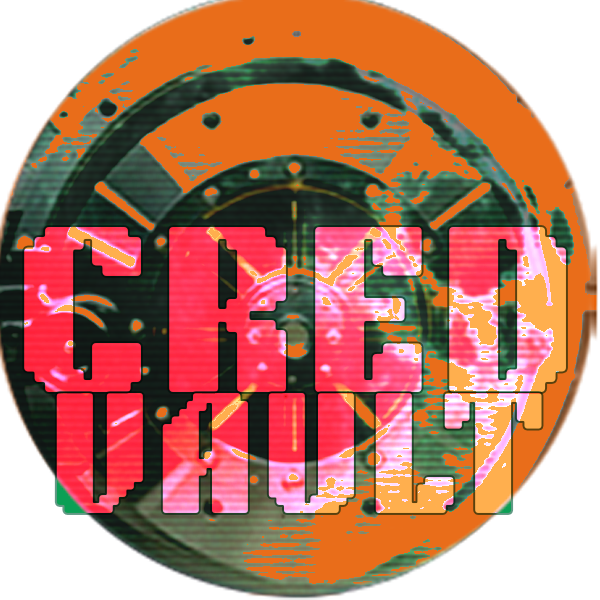
<style>
.page{position:relative;width:600px;height:600px}
.page>*{position:absolute;margin:0}
.t1{font:173.8px "NTBrickSans-Regular";letter-spacing:0.02em;font-weight:bold}
.t2{font:125.8px "NTBrickSans-Regular";letter-spacing:0.02em;font-weight:bold}
</style>
<div class="page">
<p class="t1" style="left:24px;top:227px;width:542px;height:165px">CRED</p>
<p class="t2" style="left:56px;top:393px;width:486px;height:120px">VAULT</p>
</div>
